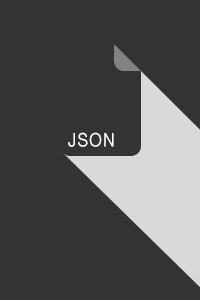
<style>
.page{position:relative;width:200px;height:300px;background:#333333}
.page>*{position:absolute;margin:0}
.t1{font:18.8px "HelveticaNeue";letter-spacing:0.075em;color:#ffffff;scale:0.87 1}
</style>
<div class="page">
<p class="t1" style="left:68px;top:132px;width:46px;height:15px">JSON</p>
</div>
